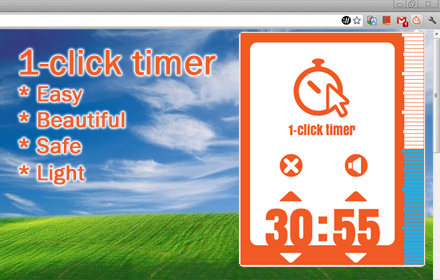
<style>
.page{position:relative;width:440px;height:280px;background:#ffffff}
.page>*{position:absolute;margin:0}
.t1{font:22px "FranklinGothic-Book";color:#f15a24;font-weight:bold}
.t2{font:36px "FranklinGothic-Book";color:#f15a24;font-weight:bold}
</style>
<div class="page">
<p class="t1" style="left:19px;top:49px;width:197px;height:136px"><span class="t2">1-click timer<br></span>* Easy<br>* Beautiful<br>* Safe<br>* Light</p>
</div>
